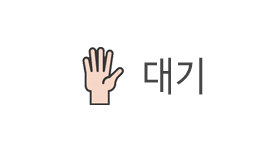
<style>
.page{position:relative;width:280px;height:150px;background:#ffffff}
.page>*{position:absolute;margin:0}
.t1{font:40px "SeN-CM";color:#464545}
</style>
<div class="page">
<p class="t1" style="left:144px;top:57px;width:59px;height:38px">대기</p>
</div>
